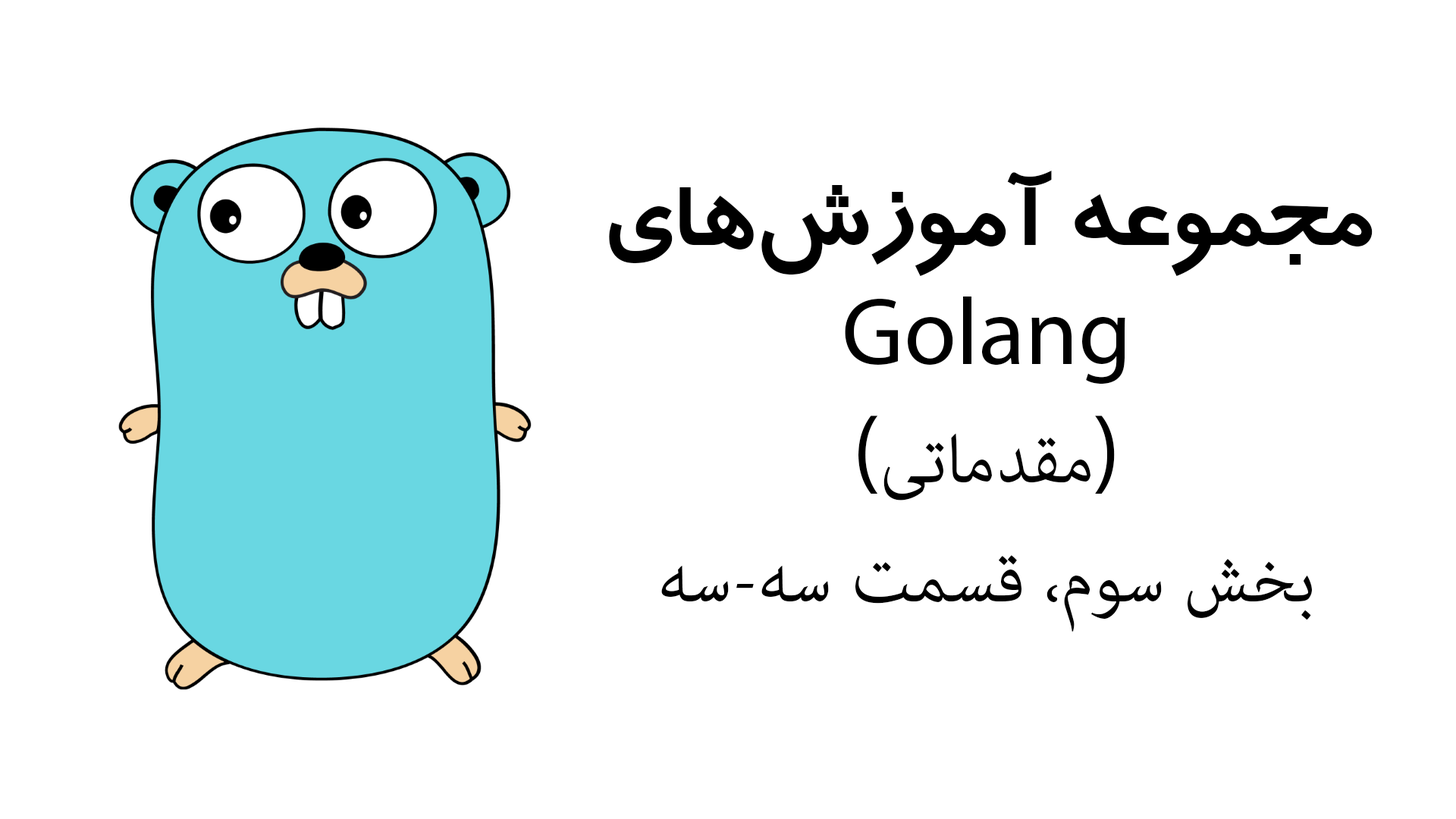
<style>
.page{position:relative;width:1456px;height:819px;background:#ffffff}
.page>*{position:absolute;margin:0}
.t1{font:95.5px "AdobeArabic-Regular";color:#000000}
.t2{font:95.5px "BTrafficBold";color:#000000}
.t3{font:95.5px "MyriadPro-Regular";color:#000000}
</style>
<div class="page">
<p class="t1" style="left:609px;top:171px;width:764px;height:461px;text-align:center"><span class="t2">مجموعه آموزش‌های<br></span><span class="t3">Golang<br>(</span>مقدماتی<span class="t3">)<br></span>بخش سوم، قسمت سه-سه</p>
</div>
